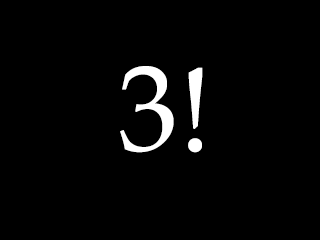
<style>
.page{position:relative;width:320px;height:240px;background:#000000}
.page>*{position:absolute;margin:0}
.t1{font:120px "BookAntiqua";color:#ffffff}
</style>
<div class="page">
<p class="t1" style="left:120px;top:66px;width:83px;height:87px">3!</p>
</div>
